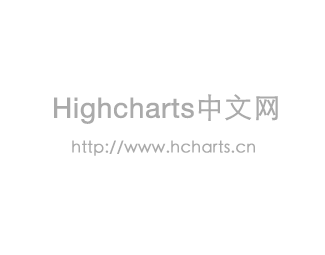
<style>
.page{position:relative;width:325px;height:255px;background:#ffffff}
.page>*{position:absolute;margin:0}
.t1{font:28px "HelveticaNeue";color:#aaaaaa;font-weight:bold}
.t2{font:28px "STHeitiSC-Light";color:#aaaaaa;font-weight:bold}
.t3{font:16px "STHeitiSC-Light";color:#aaaaaa;font-weight:bold}
</style>
<div class="page">
<p class="t1" style="left:54px;top:94px;width:224px;height:30px">Highcharts<span class="t2">中文网</span></p>
<p class="t3" style="left:72px;top:140px;width:183px;height:16px">http://www.hcharts.cn</p>
</div>
